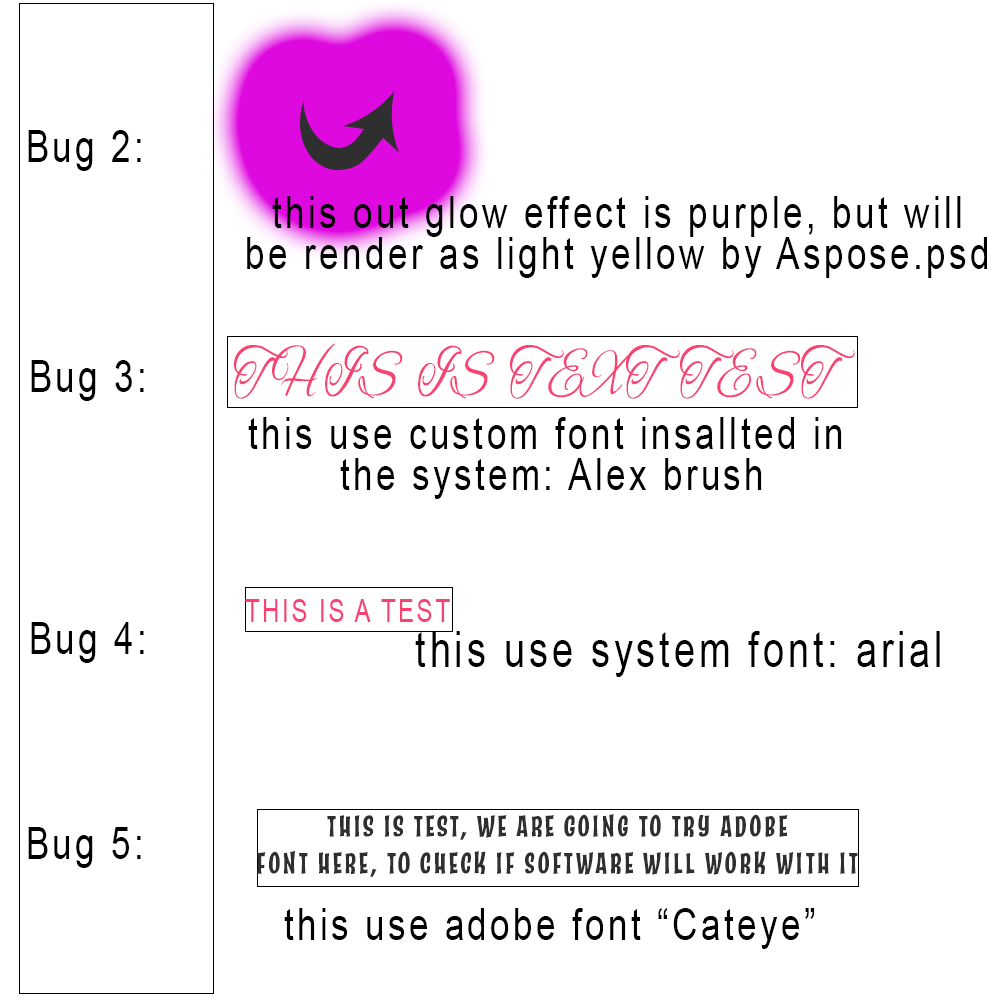
<style>
.page{position:relative;width:1000px;height:1000px;background:#ffffff}
.page>*{position:absolute;margin:0}
.t1{font:45.4px "ArialMT";letter-spacing:0.1em;color:#000000;scale:0.77 1}
.t2{font:45.4px/41.7px "ArialMT";letter-spacing:0.1em;color:#000000;scale:0.77 1}
.t3{font:66px "AlexBrush-Regular";letter-spacing:0.1em;color:#f74272;text-transform:uppercase;scale:0.77 1}
.t4{font:31.6px "ArialMT";letter-spacing:0.1em;color:#f74272;text-transform:uppercase;scale:0.77 1}
.t5{font:49.5px "ArialMT";letter-spacing:0.1em;color:#000000;scale:0.77 1}
.t6{font:28.9px/36.5px "Catseye-Bold";letter-spacing:0.1em;color:#2f2f2f;text-transform:uppercase;scale:0.77 1}
</style>
<div class="page">
<p class="t1" style="left:28px;top:130px;width:113px;height:41px">Bug 2:</p>
<p class="t2" style="left:247px;top:196px;width:740px;height:82px;text-align:center">this out glow effect is purple, but will<br>be render as light yellow by Aspose.psd</p>
<p class="t3" style="left:234px;top:343px;width:621px;height:56px">This Is Text Test</p>
<p class="t1" style="left:31px;top:360px;width:113px;height:41px">Bug 3:</p>
<p class="t2" style="left:248px;top:417px;width:594px;height:82px;text-align:center">this use custom font insallted in<br> the system: Alex brush</p>
<p class="t4" style="left:245px;top:599px;width:205px;height:23px">This is a Test</p>
<p class="t1" style="left:31px;top:622px;width:113px;height:41px">Bug 4:</p>
<p class="t5" style="left:415px;top:631px;width:525px;height:46px">this use system font: arial</p>
<p class="t6" style="left:257px;top:814px;width:601px;height:63px;text-align:center">This is test, we are going to try adobe<br>font here, to check if software will work with it</p>
<p class="t1" style="left:28px;top:827px;width:113px;height:41px">Bug 5:</p>
<p class="t1" style="left:284px;top:908px;width:531px;height:41px">this use adobe font “Cateye”</p>
</div>
